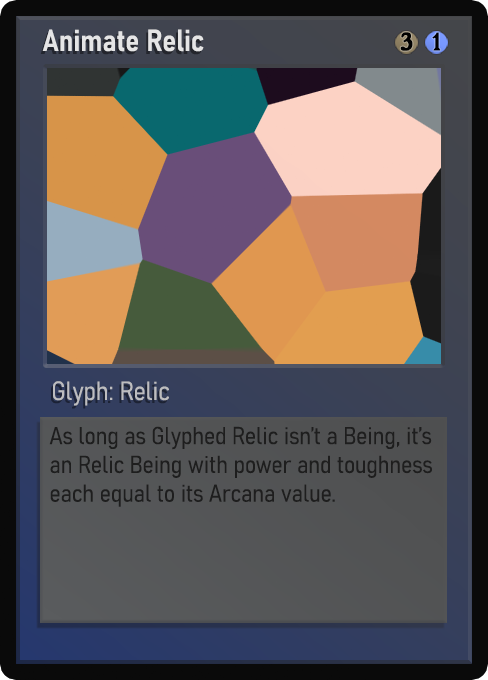
<style>
.page{position:relative;width:488px;height:680px}
.page>*{position:absolute;margin:0}
.t1{font:30px "Bahnschrift-SemiBoldSemiCondensed";color:#f2f2f2;font-weight:bold}
.t2{font:25px "WTRRoycroft";color:#000000;font-weight:bold;scale:1.09 1}
.t3{font:26px "Bahnschrift-LightSemiCondensed";color:#c8c8c8;font-weight:bold}
.t4{font:24px "Bahnschrift-LightSemiCondensed";color:#1e1e1e;font-weight:bold}
</style>
<div class="page">
<p class="t1" style="left:42px;top:29px;width:162px;height:23px;opacity:0.9">Animate Relic</p>
<p class="t2" style="left:400px;top:32px;width:13px;height:19px">3</p>
<p class="t2" style="left:432px;top:32px;width:9px;height:19px">1</p>
<p class="t3" style="left:53px;top:381px;width:116px;height:25px;opacity:0.9">Glyph: Relic</p>
<p class="t4" style="left:49px;top:426px;width:383px;height:81px">As long as Glyphed Relic isn’t a Being, it’s an Relic Being with power and toughness each equal to its Arcana value.</p>
</div>
